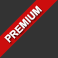
<style>
.page{position:relative;width:58px;height:58px;background:#333333}
.page>*{position:absolute;margin:0}
.t1{font:10px "Arial-BoldMT";color:#ffffff}
</style>
<div class="page">
<p class="t1" style="left:4px;top:5px;width:38px;height:38px;rotate:-45deg">PREMIUM</p>
</div>
